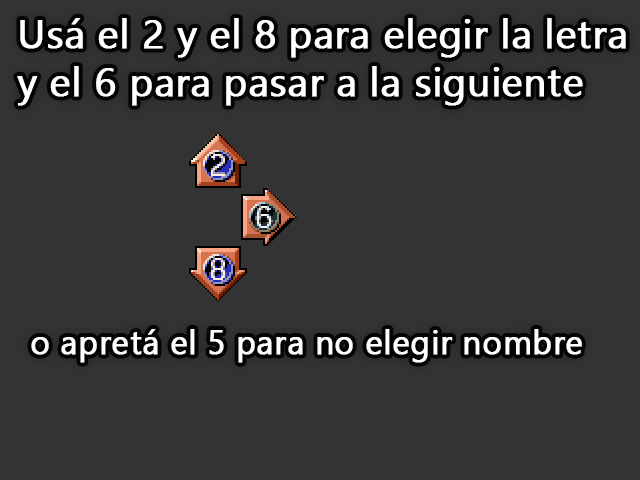
<style>
.page{position:relative;width:640px;height:480px;background:#333333}
.page>*{position:absolute;margin:0}
.t1{font:40px "SegoeUI";color:#ffffff;font-weight:bold}
.t2{font:33.3px "SegoeUI";color:#ffffff;font-weight:bold}
</style>
<div class="page">
<p class="t1" style="left:17px;top:18px;width:609px;height:88px">Usá el 2 y el 8 para elegir la letra<br>y el 6 para pasar a la siguiente</p>
<p class="t2" style="left:31px;top:329px;width:551px;height:34px">o apretá el 5 para no elegir nombre</p>
</div>
